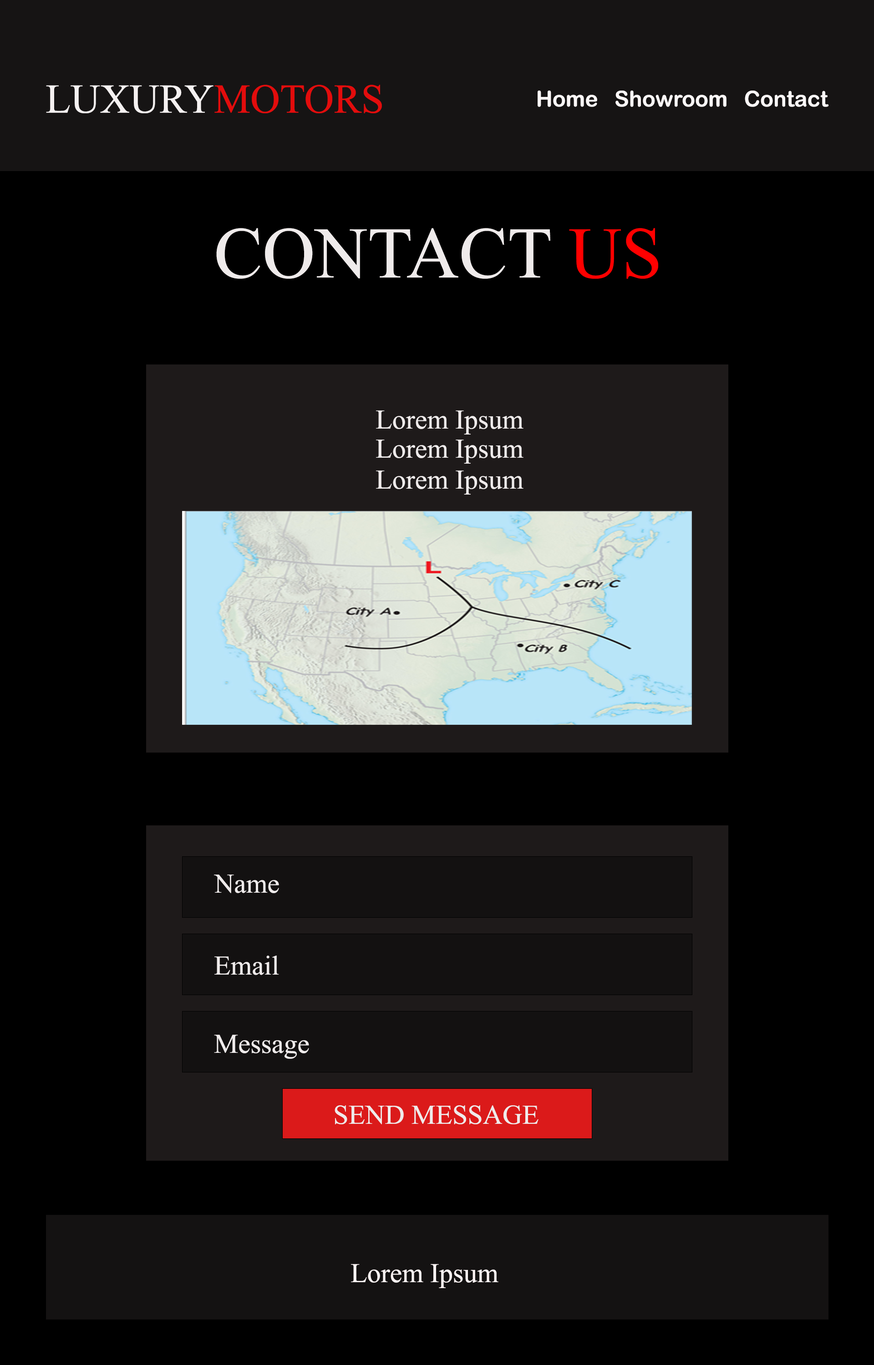
<style>
.page{position:relative;width:874px;height:1365px;background:#000000}
.page>*{position:absolute;margin:0}
.t1{font:41px "TimesNewRomanPSMT";color:#f5f1f1}
.t2{font:41px "TimesNewRomanPSMT";color:#e30c0c}
.t3{font:21.8px "ArialRoundedMTBold";color:#fcf8f8}
.t4{font:72.8px "TimesNewRomanPSMT";color:#efebeb}
.t5{font:72.8px "TimesNewRomanPSMT";color:#ff0000}
.t6{font:27.3px "TimesNewRomanPSMT";color:#efebeb}
.t7{font:27.3px "TimesNewRomanPSMT";color:#fbf3f3}
</style>
<div class="page">
<p class="t1" style="left:46px;top:85px;width:336px;height:28px">LUXURY<span class="t2">MOTORS</span></p>
<p class="t3" style="left:537px;top:91px;width:292px;height:16px">Home   Showroom   Contact</p>
<p class="t4" style="left:216px;top:228px;width:442px;height:51px">CONTACT<span class="t5"> US</span></p>
<p class="t6" style="left:376px;top:410px;width:147px;height:25px">Lorem Ipsum</p>
<p class="t6" style="left:376px;top:440px;width:147px;height:24px">Lorem Ipsum</p>
<p class="t6" style="left:376px;top:470px;width:147px;height:25px">Lorem Ipsum</p>
<p class="t6" style="left:214px;top:874px;width:65px;height:19px">Name</p>
<p class="t6" style="left:214px;top:955px;width:65px;height:20px">Email</p>
<p class="t6" style="left:214px;top:1035px;width:95px;height:24px">Message</p>
<p class="t6" style="left:334px;top:1105px;width:204px;height:19px">SEND MESSAGE</p>
<p class="t7" style="left:351px;top:1264px;width:147px;height:24px">Lorem Ipsum</p>
</div>
